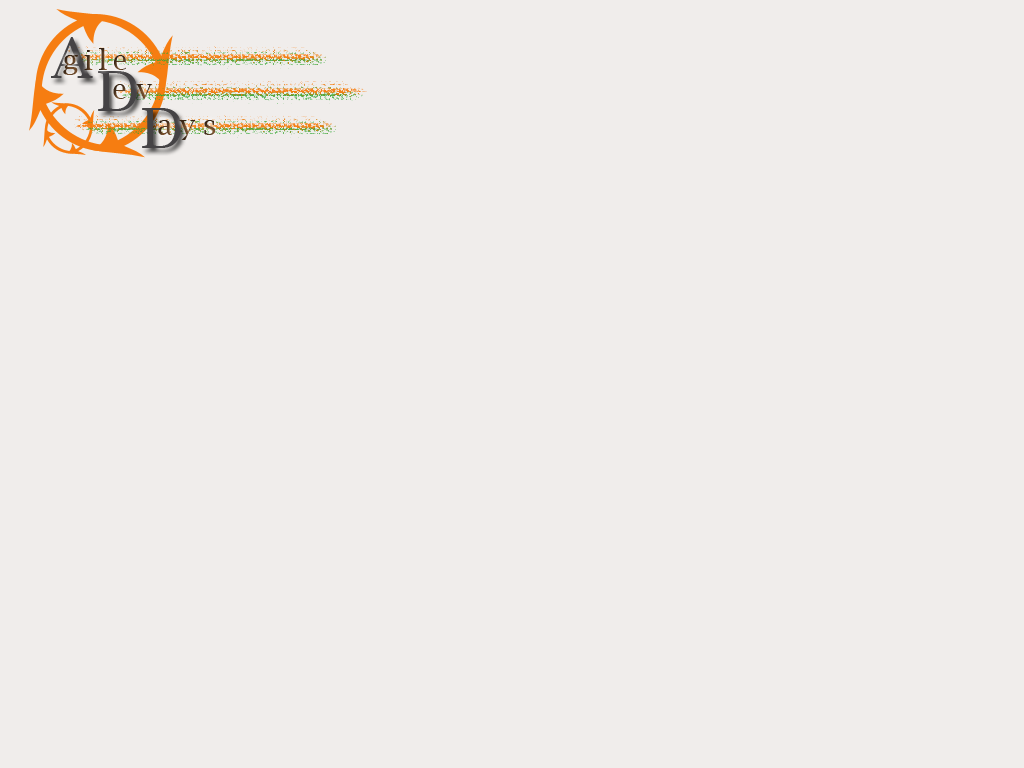
<style>
.page{position:relative;width:1024px;height:768px;background:#f0edeb}
.page>*{position:absolute;margin:0}
.t1{font:56.3px "LucidaBright";letter-spacing:0.2em;color:#454345}
.t2{font:28.1px "LucidaBright";letter-spacing:0.2em}
.t3{font:28.1px "LucidaBright";letter-spacing:0.34em}
.t4{font:28.1px "LucidaBright";letter-spacing:0.26em}
</style>
<div class="page">
<p class="t1" style="left:51px;top:37px;width:42px;height:41px">A</p>
<p class="t2" style="left:63px;top:48px;width:63px;height:27px">gile</p>
<p class="t1" style="left:98px;top:71px;width:39px;height:40px">D</p>
<p class="t3" style="left:113px;top:84px;width:39px;height:15px">ev</p>
<p class="t1" style="left:142px;top:108px;width:39px;height:40px">D</p>
<p class="t4" style="left:158px;top:120px;width:58px;height:20px">ays</p>
</div>
